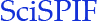
<style>
.page{position:relative;width:97px;height:21px;background:#ffffff}
.page>*{position:absolute;margin:0}
.t1{font:30px "PalatinoLinotype-Roman";color:#1431d8}
</style>
<div class="page">
<p class="t1" style="left:0px;top:0px;width:97px;height:21px">SciSPIF</p>
</div>
